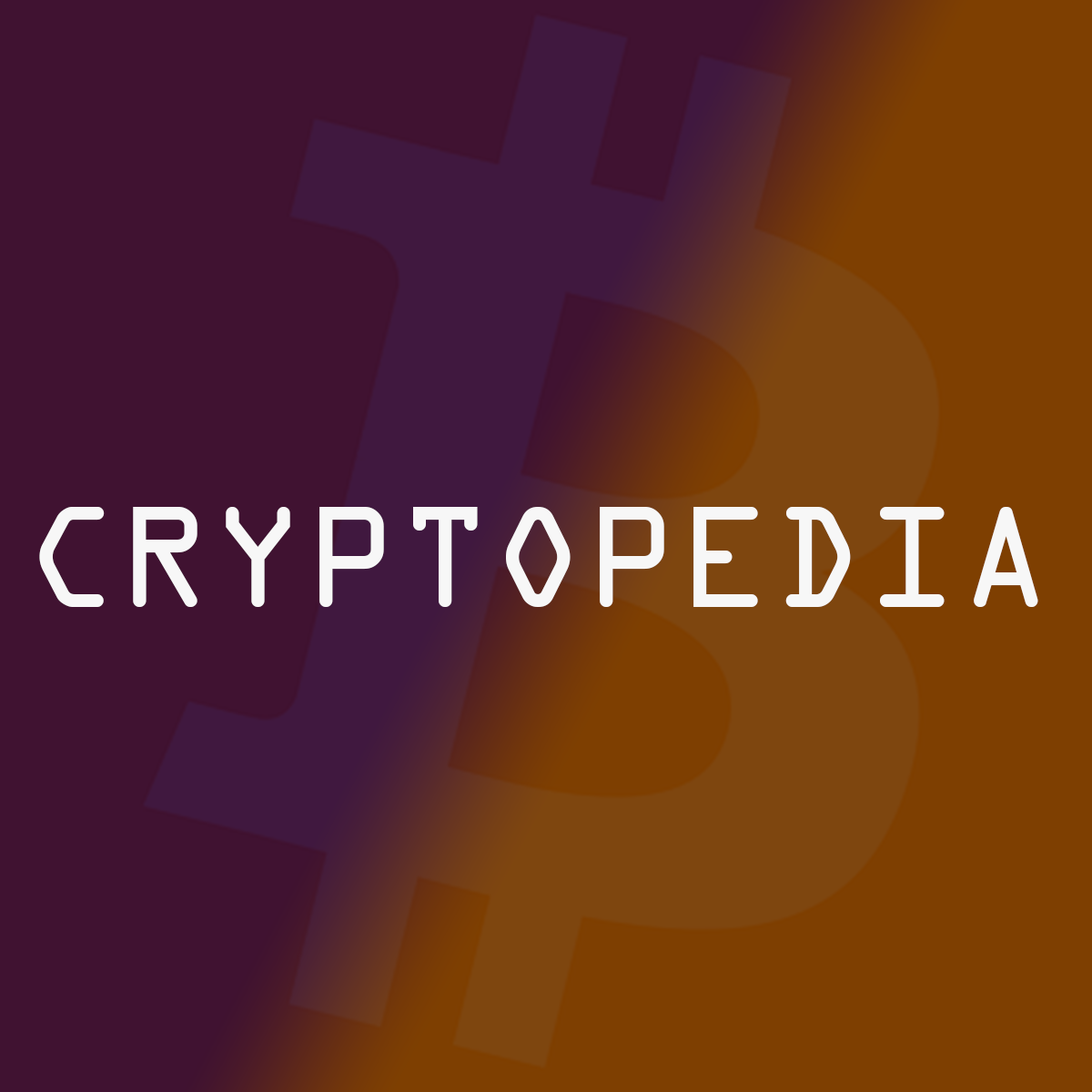
<style>
.page{position:relative;width:1092px;height:1092px;background:#401231}
.page>*{position:absolute;margin:0}
.t1{font:154.7px "OCRAExtended";color:#f7f7f7}
</style>
<div class="page">
<p class="t1" style="left:39px;top:507px;width:999px;height:100px">CRYPTOPEDIA</p>
</div>
